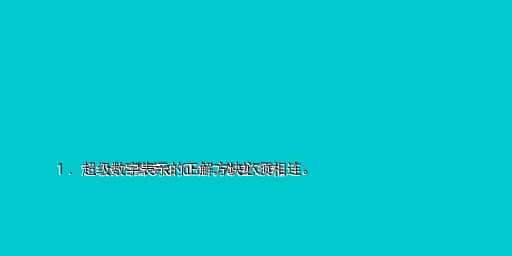
<style>
.page{position:relative;width:512px;height:256px;background:#00c8cf}
.page>*{position:absolute;margin:0}
.t1{font:14.7px "DFPHeiW5-GB"}
</style>
<div class="page">
<p class="t1" style="left:58px;top:161px;width:250px;height:15px">１．超级数字表示的正解方块必须相连。</p>
</div>
